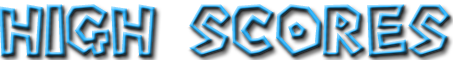
<style>
.page{position:relative;width:453px;height:60px}
.page>*{position:absolute;margin:0}
.t1{font:65px "Super-Mario-Bros.-Regular"}
</style>
<div class="page">
<p class="t1" style="left:0px;top:4px;width:450px;height:52px">High Scores</p>
</div>
